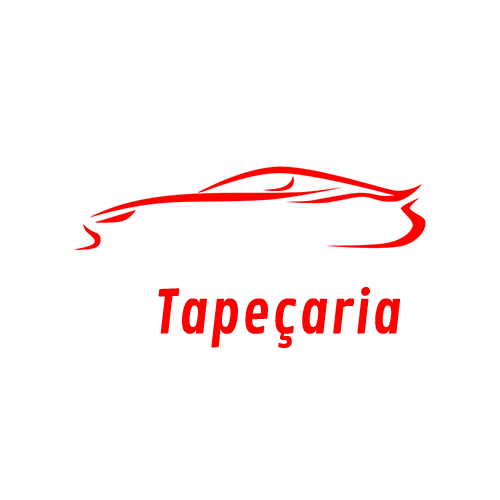
<style>
.page{position:relative;width:500px;height:500px;background:#ffffff}
.page>*{position:absolute;margin:0}
.t1{font:58.7px "ContrailOne-Regular";letter-spacing:0.025em;color:#ff0000}
</style>
<div class="page">
<p class="t1" style="left:158px;top:287px;width:243px;height:61px">Tapeçaria</p>
</div>
